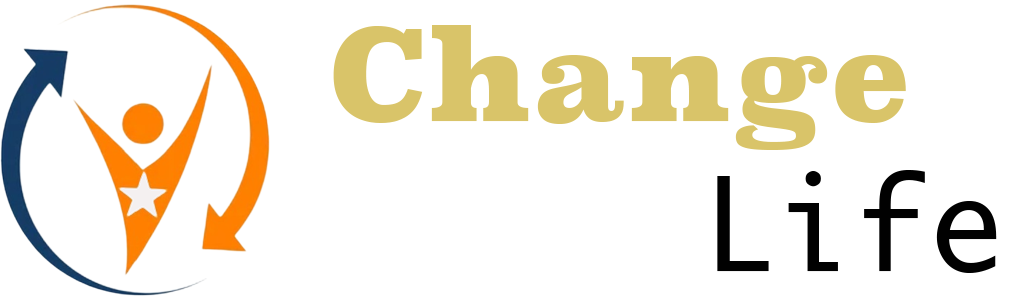
<style>
.page{position:relative;width:1033px;height:300px;background:#ffffff}
.page>*{position:absolute;margin:0}
.t1{font:125px "Superclarendon-Black";color:#d9c469}
.t2{font:125px "Ayuthaya";color:#010101}
</style>
<div class="page">
<p class="t1" style="left:333px;top:25px;width:573px;height:125px">Change</p>
<p class="t2" style="left:717px;top:170px;width:280px;height:103px">Life</p>
</div>
